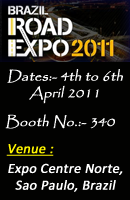
<style>
.page{position:relative;width:130px;height:200px;background:#020201}
.page>*{position:absolute;margin:0}
.t1{font:14px "Papyrus-Regular";color:#ffffff;font-weight:bold;font-style:italic}
.t2{font:14px "Calibri";color:#fff600;font-weight:bold;font-style:italic;text-decoration:underline}
.t3{font:14px "Calibri";color:#ffffff;font-weight:bold;font-style:italic}
</style>
<div class="page">
<p class="t1" style="left:7px;top:69px;width:116px;height:35px;text-align:center">Dates:- 4th to 6th April 2011</p>
<p class="t1" style="left:5px;top:114px;width:110px;height:15px">Booth No.:- 340</p>
<p class="t2" style="left:6px;top:144px;width:48px;height:12px">Venue :</p>
<p class="t3" style="left:8px;top:163px;width:115px;height:29px;text-align:center">Expo Centre Norte, <br>Sao Paulo, Brazil</p>
</div>
